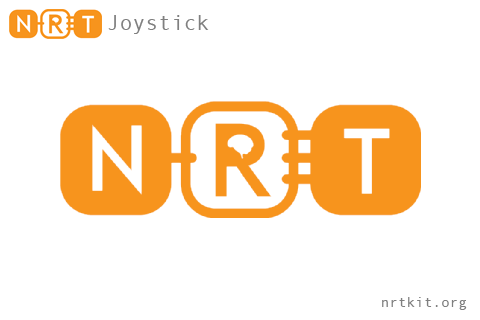
<style>
.page{position:relative;width:480px;height:320px;background:#ffffff}
.page>*{position:absolute;margin:0}
.t1{font:21.4px "AndaleMono";color:#7f7f7f}
.t2{font:14.4px "AndaleMono";color:#7f7f7f}
</style>
<div class="page">
<p class="t1" style="left:108px;top:15px;width:101px;height:19px">Joystick</p>
<p class="t2" style="left:382px;top:297px;width:85px;height:13px">nrtkit.org</p>
</div>
